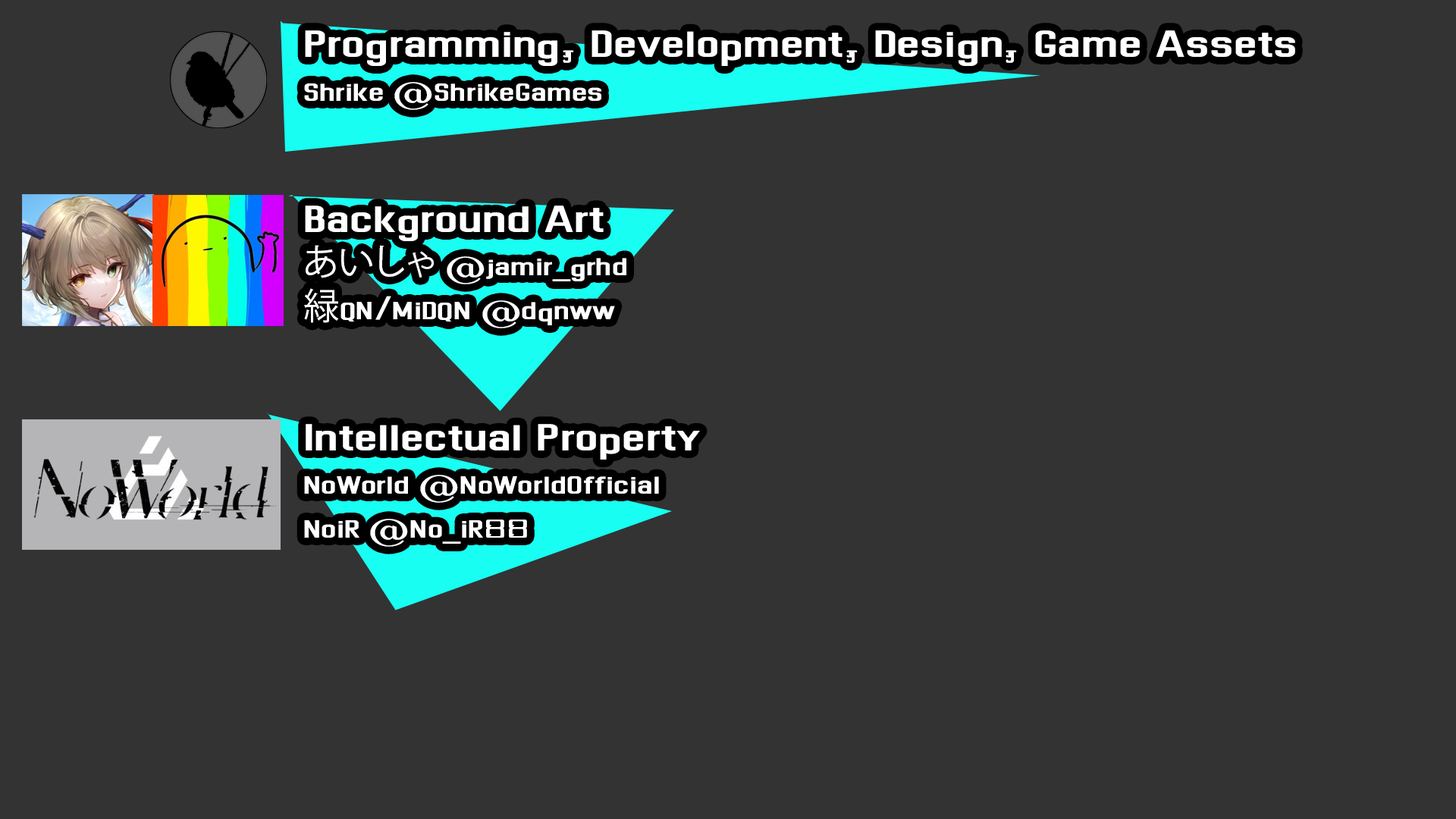
<style>
.page{position:relative;width:1456px;height:819px;background:#333333}
.page>*{position:absolute;margin:0}
.t1{font:54.6px "Dhurjati";color:#ffffff}
.t2{font:36.4px "Dhurjati";color:#ffffff}
.t3{font:36.4px "KozGoPr6N-Regular";color:#ffffff}
</style>
<div class="page">
<p class="t1" style="left:304px;top:30px;width:991px;height:517px">Programming, Development, Design, Game Assets<br><span class="t2">Shrike @ShrikeGames<br></span><br>Background Art<br><span class="t3">あいしゃ</span><span class="t2"> @jamir_grhd<br></span><span class="t3">緑</span><span class="t2">QN/MiDQN @dqnww<br></span><br>Intellectual Property<br><span class="t2">NoWorld @NoWorldOfficial<br>NoiR @No_iR88</span></p>
</div>
